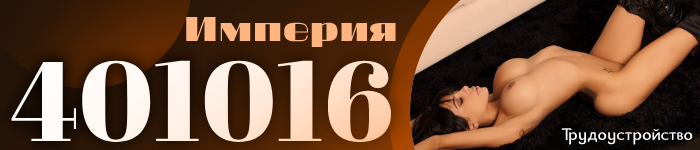
<style>
.page{position:relative;width:700px;height:150px}
.page>*{position:absolute;margin:0}
.t1{font:30px "20db";color:#ffb580}
.t2{font:112.6px "AbrilFatface-Regular"}
.t3{font:18px "Bainsley";color:#ffffff}
</style>
<div class="page">
<p class="t1" style="left:186px;top:17px;width:210px;height:30px">Империя</p>
<p class="t2" style="left:11px;top:60px;width:381px;height:83px">401016</p>
<p class="t3" style="left:561px;top:128px;width:132px;height:17px">Трудоустройство</p>
</div>
